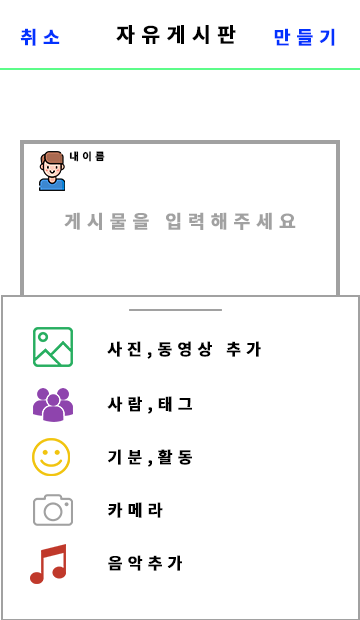
<style>
.page{position:relative;width:360px;height:620px;background:#ffffff}
.page>*{position:absolute;margin:0}
.t1{font:18.2px "NotoSansKR-Bold";letter-spacing:0.3em;color:#0332fe;font-weight:bold}
.t2{font:20.2px "NotoSansKR-Bold";letter-spacing:0.3em;color:#000000;font-weight:bold}
.t3{font:10.2px "NotoSansKR-Bold";letter-spacing:0.3em;color:#000000;font-weight:bold}
.t4{font:18.2px "NotoSansKR-Bold";letter-spacing:0.3em;color:#a1a1a1;font-weight:bold}
.t5{font:16px "NotoSansKR-Bold";letter-spacing:0.3em;color:#000000;font-weight:bold}
</style>
<div class="page">
<p class="t1" style="left:20px;top:28px;width:40px;height:18px">취소</p>
<p class="t2" style="left:116px;top:25px;width:120px;height:19px">자유게시판</p>
<p class="t1" style="left:274px;top:28px;width:61px;height:18px">만들기</p>
<p class="t3" style="left:69px;top:151px;width:36px;height:11px">내이름</p>
<p class="t4" style="left:64px;top:212px;width:232px;height:18px">게시물을 입력해주세요</p>
<p class="t5" style="left:107px;top:341px;width:154px;height:18px">사진,동영상 추가</p>
<p class="t5" style="left:107px;top:396px;width:85px;height:18px">사람,태그</p>
<p class="t5" style="left:108px;top:449px;width:84px;height:18px">기분,활동</p>
<p class="t5" style="left:108px;top:502px;width:55px;height:16px">카메라</p>
<p class="t5" style="left:108px;top:555px;width:74px;height:16px">음악추가</p>
</div>
